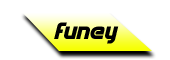
<style>
.page{position:relative;width:170px;height:60px;background:#ffffff}
.page>*{position:absolute;margin:0}
.t1{font:25px "Spantaran";color:#000000}
</style>
<div class="page">
<p class="t1" style="left:54px;top:22px;width:65px;height:22px">funey</p>
</div>
